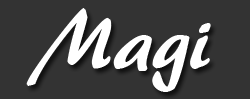
<style>
.page{position:relative;width:250px;height:99px;background:#333333}
.page>*{position:absolute;margin:0}
.t1{font:88.7px "ARBERKLEY";color:#ffffff;scale:0.93 1}
</style>
<div class="page">
<p class="t1" style="left:26px;top:8px;width:185px;height:84px">Magi</p>
</div>
